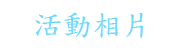
<style>
.page{position:relative;width:180px;height:50px;background:#ffffff}
.page>*{position:absolute;margin:0}
.t1{font:30px "DFKaiShu-SB-Estd-BF";color:#6fd8ff}
</style>
<div class="page">
<p class="t1" style="left:35px;top:12px;width:109px;height:26px">活動相片</p>
</div>
